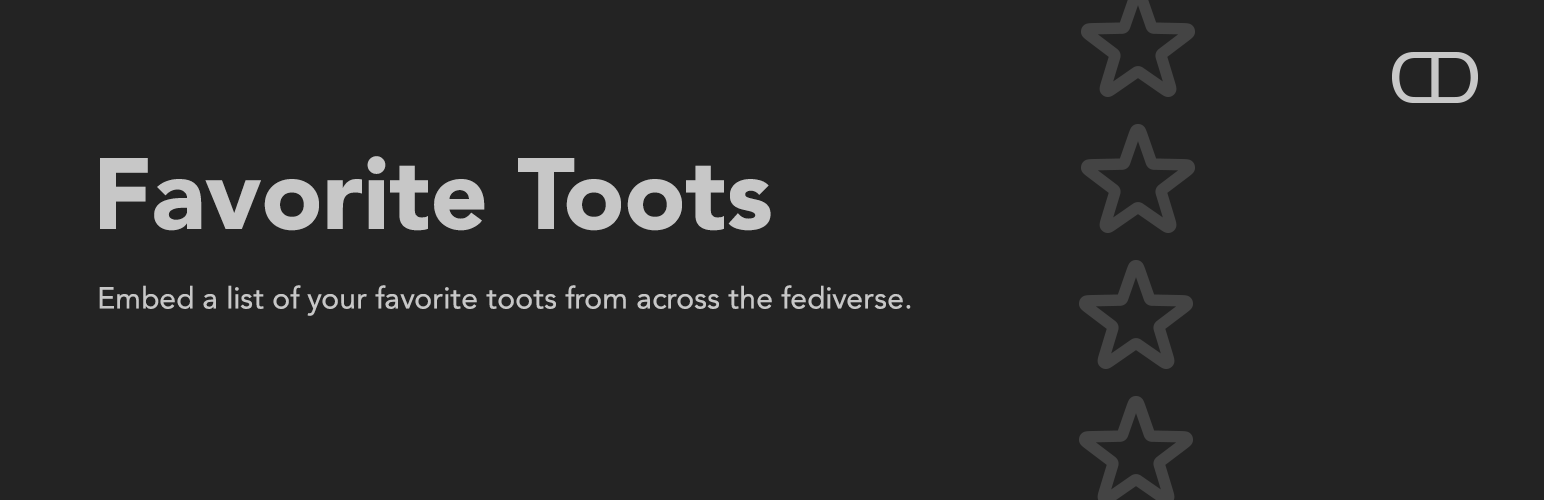
<style>
.page{position:relative;width:1544px;height:500px;background:#232323}
.page>*{position:absolute;margin:0}
.t1{font:100px "Avenir-Black";color:#c7c7c7}
.t2{font:30px "Avenir-Roman";color:#c7c7c7}
</style>
<div class="page">
<p class="t1" style="left:100px;top:156px;width:671px;height:75px">Favorite Toots</p>
<p class="t2" style="left:99px;top:285px;width:812px;height:31px">Embed a list of your favorite toots from across the fediverse.</p>
</div>
